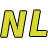
<style>
.page{position:relative;width:48px;height:48px;background:#ffffff}
.page>*{position:absolute;margin:0}
.t1{font:35px "DejaVuSansCondensed-BoldOblique";color:#dada35}
</style>
<div class="page">
<p class="t1" style="left:1px;top:11px;width:26px;height:26px">N</p>
<p class="t1" style="left:29px;top:10px;width:18px;height:27px">L</p>
</div>
